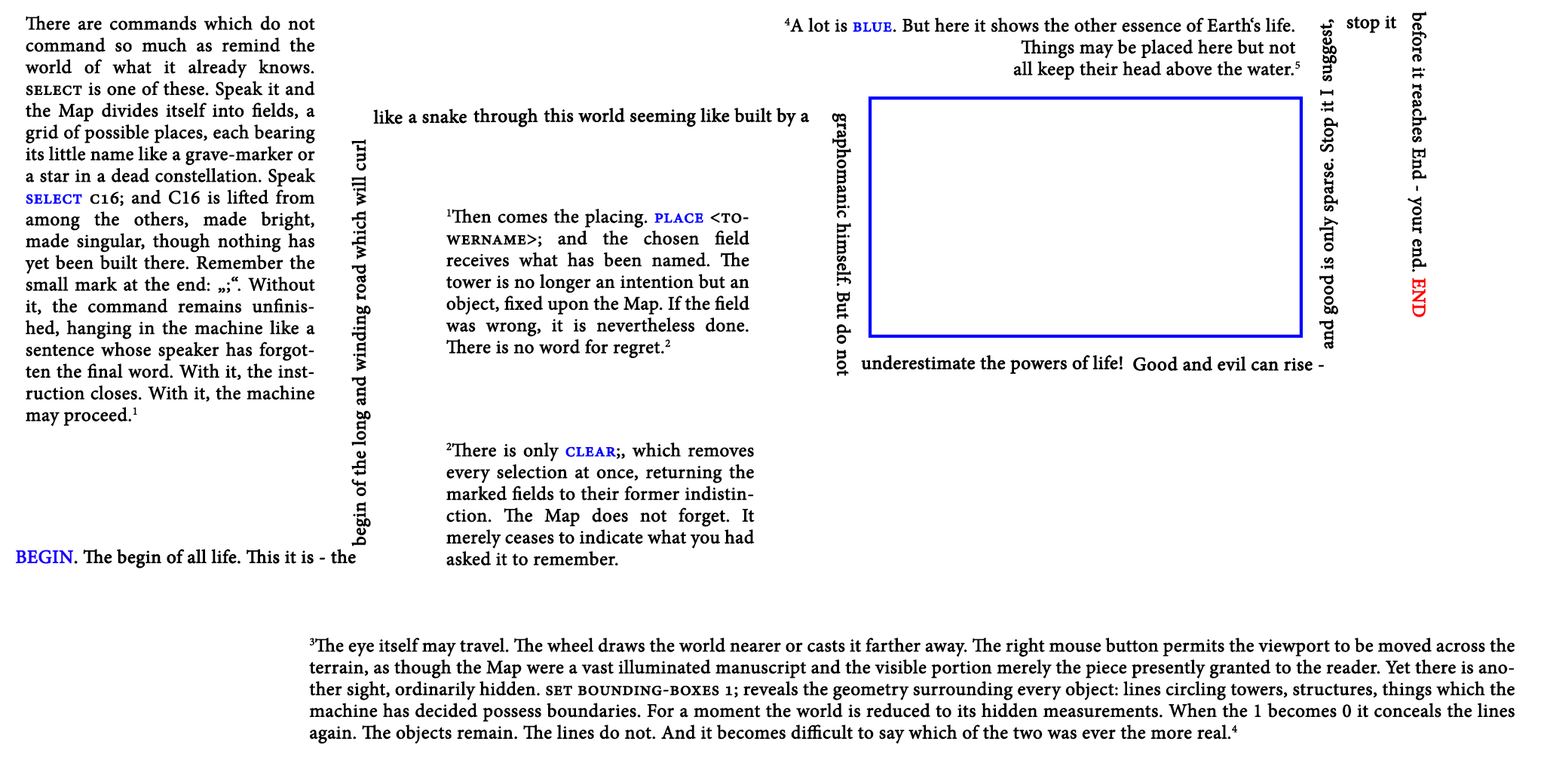
<style>
.page{position:relative;width:1544px;height:772px;background:#ffffff}
.page>*{position:absolute;margin:0}
.t1{font:18.9px/21.7px "MinionPro-Regular";color:#000000;font-weight:bold}
.t2{font:18.9px/21.7px "MinionPro-Regular";color:#000000;font-variant:small-caps;font-weight:bold}
.t3{font:18.9px/21.7px "MinionPro-Regular";color:#0000ff;font-variant:small-caps;font-weight:bold}
</style>
<div class="page">
<p class="t1" style="left:25px;top:15px;width:291px;height:411px;text-align:justify">There are commands which do not command so much as remind the world of what it already knows. <span class="t2">select </span>is one of these. Speak it and the Map divides itself into fields, a grid of possible places, each bearing its little name like a grave-marker or a star in a dead constellation. Speak <span class="t3">select</span><span class="t2"> c16;</span> and C16 is lifted from among the others, made bright, made singular, though nothing has yet been built there. Remember the small mark at the end: „<span class="t2">;“</span>. Without it, the command remains unfinished, hanging in the machine like a sentence whose speaker has forgotten the final word. With it, the instruction closes. With it, the machine may proceed.1</p>
<p class="t1" style="left:784px;top:17px;width:517px;height:63px;text-align:right">4A lot is <span class="t3">blue</span>. But here it shows the other essence of Earth‘s life. <br>Things may be placed here but not <br>all keep their head above the water.5</p>
<p class="t1" style="left:446px;top:208px;width:304px;height:150px;text-align:justify">1Then comes the placing. <span class="t3">place</span><span class="t2"> &lt;towername&gt;;</span> and the chosen field receives what has been named. The tower is no longer an intention but an object, fixed upon the Map. If the field was wrong, it is nevertheless done. There is no word for regret.2</p>
<p class="t1" style="left:446px;top:442px;width:309px;height:124px;text-align:justify">2There is only <span class="t3">clear</span><span class="t2">;</span>, which removes every selection at once, returning the marked fields to their former indistinction. The Map does not forget. It merely ceases to indicate what you had asked it to remember.</p>
<p class="t1" style="left:309px;top:637px;width:1206px;height:107px;text-align:justify">3The eye itself may travel. The wheel draws the world nearer or casts it farther away. The right mouse button permits the viewport to be moved across the terrain, as though the Map were a vast illuminated manuscript and the visible portion merely the piece presently granted to the reader. Yet there is another sight, ordinarily hidden. <span class="t2">set bounding-boxes 1; </span>reveals the geometry surrounding every object: lines circling towers, structures, things which the machine has decided possess boundaries. For a moment the world is reduced to its hidden measurements. When the 1 becomes 0 it conceals the lines again. The objects remain. The lines do not. And it becomes difficult to say which of the two was ever the more real.4</p>
</div>
